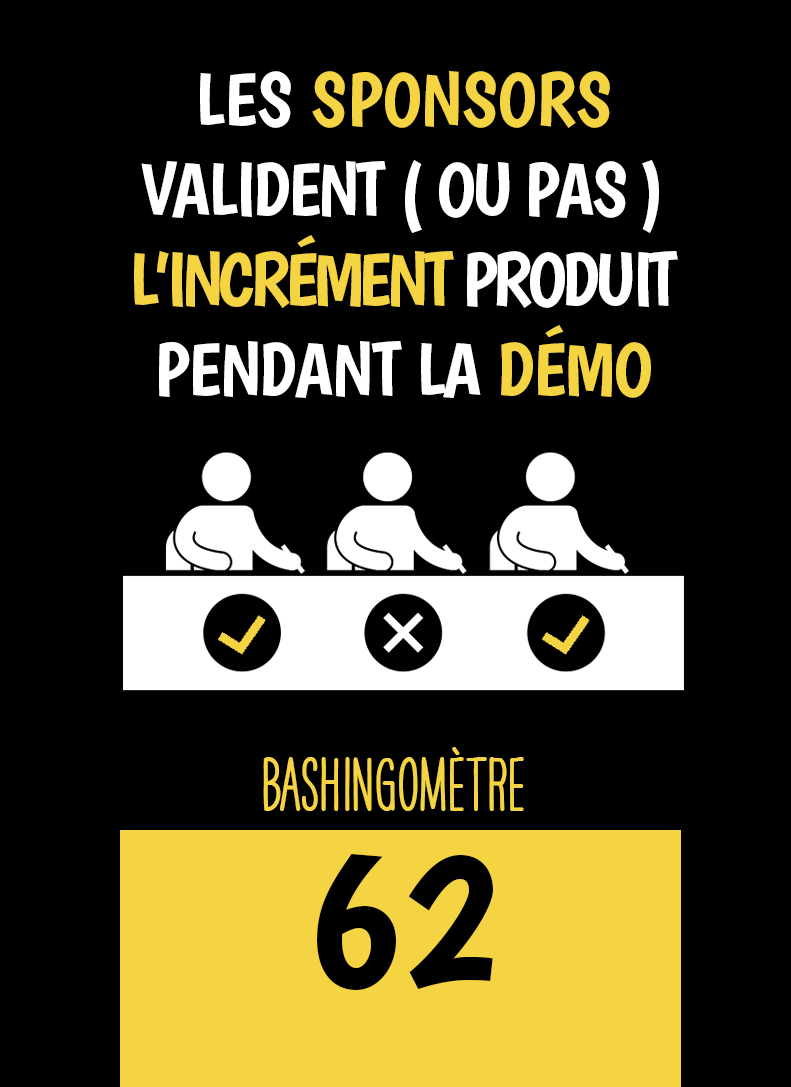
<style>
.page{position:relative;width:791px;height:1087px;background:#000000}
.page>*{position:absolute;margin:0}
.t1{font:75px "Boogaloo-Regular";letter-spacing:-0.04em;color:#ffffff}
.t2{font:75px "Boogaloo-Regular";color:#ffffff}
.t3{font:75px "Boogaloo-Regular";color:#f4d443}
.t4{font:75px "Boogaloo-Regular";letter-spacing:-0.06em;color:#f4d443}
.t5{font:75px "Boogaloo-Regular";letter-spacing:-0.06em;color:#ffffff}
.t6{font:75px "Boogaloo-Regular";letter-spacing:-0.02em;color:#ffffff}
.t7{font:75px "Boogaloo-Regular";letter-spacing:-0.02em;color:#f4d443}
.t8{font:66.7px "HAVEANICEDAYTallW04-Bold";color:#f4d443}
.t9{font:200px "Boogaloo-Regular";color:#000000}
</style>
<div class="page">
<p class="t1" style="left:134px;top:71px;width:544px;height:327px;text-align:center"><span class="t2">LES </span><span class="t3">SPONSORS<br></span>VALIDENT ( OU PAS ) <span class="t4">L’INCRÉMENT </span><span class="t5">PRODUIT </span><span class="t6">PENDANT LA </span><span class="t7">DÉMO</span></p>
<p class="t8" style="left:263px;top:747px;width:261px;height:64px">BASHINgomètre</p>
<p class="t9" style="left:317px;top:854px;width:176px;height:136px">62</p>
</div>
